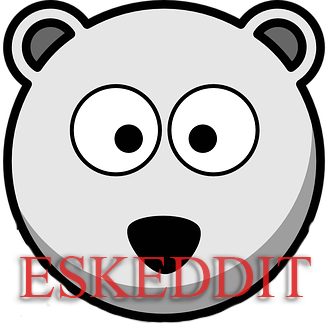
<style>
.page{position:relative;width:332px;height:326px;background:#e6e6e6}
.page>*{position:absolute;margin:0}
.t1{font:60px "MongolianBaiti";color:#d63b3b}
</style>
<div class="page">
<p class="t1" style="left:20px;top:256px;width:291px;height:42px">ESKEDDIT</p>
</div>
